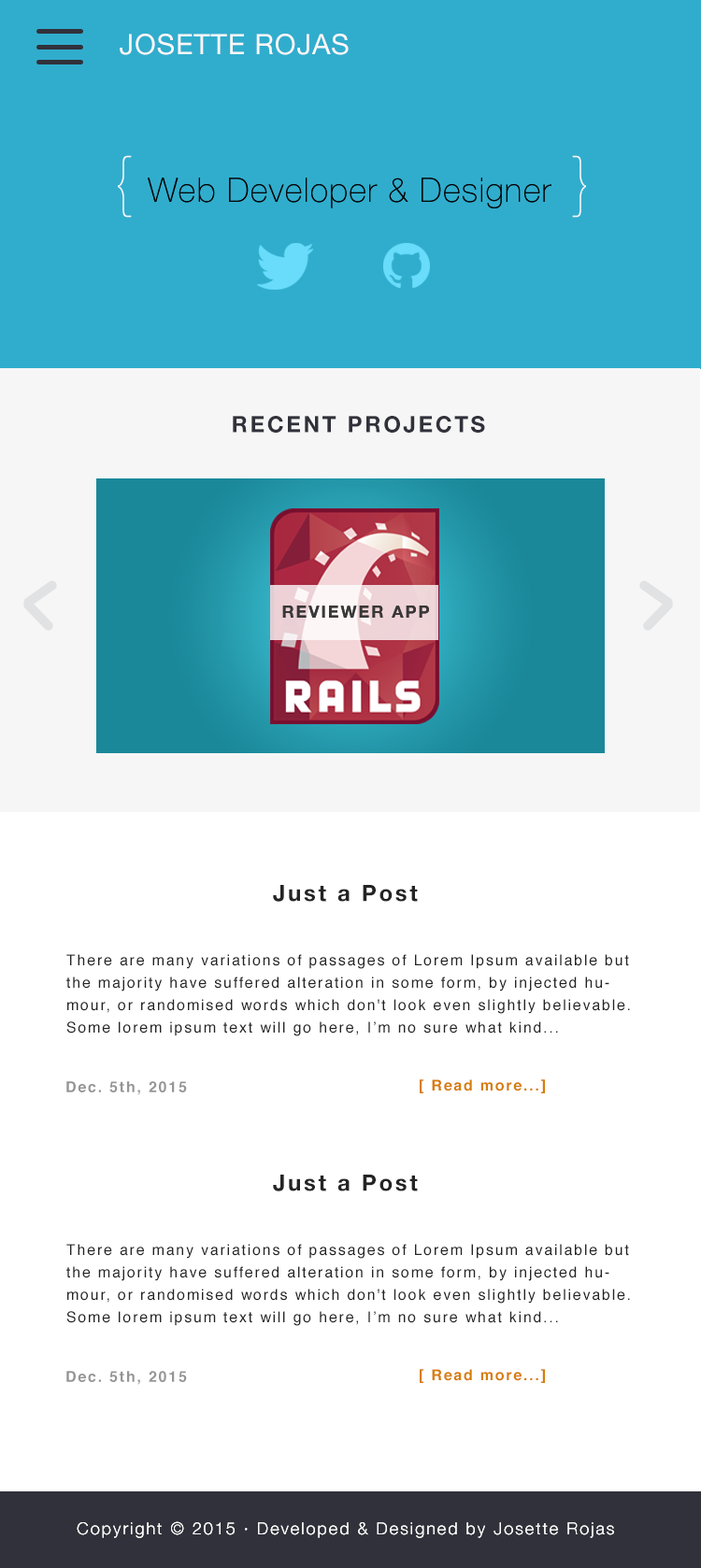
<style>
.page{position:relative;width:701px;height:1568px;background:#ffffff}
.page>*{position:absolute;margin:0}
.t1{font:28px "HelveticaNeue";letter-spacing:0.031em;color:#f7f7fb}
.t2{font:67.3px "HelveticaNeue-UltraLight";letter-spacing:0.031em;color:#f7f7fb}
.t3{font:33.6px "HelveticaNeue-Thin";letter-spacing:0.031em;color:#050505}
.t4{font:22.4px "HelveticaNeue-Bold";letter-spacing:0.111em;color:#31313b}
.t5{font:16.8px "HelveticaNeue-Bold";letter-spacing:0.111em;color:#393737}
.t6{font:22.4px "HelveticaNeue-Bold";letter-spacing:0.111em;color:#242424}
.t7{font:15px/22.4px "Helvetica";letter-spacing:0.111em;color:#242424}
.t8{font:15px "Helvetica-Bold";letter-spacing:0.111em;color:#959596}
.t9{font:15px "Helvetica-Bold";letter-spacing:0.111em;color:#d77d08}
.t10{font:16.8px "HelveticaNeue-Light";letter-spacing:0.111em;color:#fbfaf9}
</style>
<div class="page">
<p class="t1" style="left:120px;top:34px;width:229px;height:21px">JOSETTE ROJAS</p>
<p class="t2" style="left:118px;top:155px;width:14px;height:63px">{</p>
<p class="t2" style="left:572px;top:155px;width:14px;height:63px;rotate:180deg">{</p>
<p class="t3" style="left:148px;top:178px;width:403px;height:30px">Web Developer &amp; Designer</p>
<p class="t3" style="left:148px;top:178px;width:403px;height:30px">Web Developer &amp; Designer</p>
<p class="t4" style="left:233px;top:416px;width:252px;height:17px">RECENT PROJECTS</p>
<p class="t5" style="left:282px;top:606px;width:147px;height:12px">REVIEWER APP</p>
<p class="t5" style="left:282px;top:606px;width:147px;height:12px">REVIEWER APP</p>
<p class="t6" style="left:273px;top:885px;width:145px;height:17px">Just a Post</p>
<p class="t7" style="left:66px;top:954px;width:564px;height:82px">There are many variations of passages of Lorem Ipsum available but <br>the majority have suffered alteration in some form, by injected hu-<br>mour, or randomised words which don't look even slightly believable.<br>Some lorem ipsum text will go here, I’m no sure what kind...</p>
<p class="t8" style="left:66px;top:1081px;width:121px;height:14px">Dec. 5th, 2015</p>
<p class="t9" style="left:420px;top:1079px;width:125px;height:14px">[ Read more...]</p>
<p class="t6" style="left:273px;top:1175px;width:145px;height:16px">Just a Post</p>
<p class="t7" style="left:66px;top:1244px;width:564px;height:82px">There are many variations of passages of Lorem Ipsum available but <br>the majority have suffered alteration in some form, by injected hu-<br>mour, or randomised words which don't look even slightly believable.<br>Some lorem ipsum text will go here, I’m no sure what kind...</p>
<p class="t8" style="left:66px;top:1371px;width:121px;height:14px">Dec. 5th, 2015</p>
<p class="t9" style="left:420px;top:1369px;width:125px;height:14px">[ Read more...]</p>
<p class="t10" style="left:77px;top:1521px;width:537px;height:17px">Copyright © 2015 · Developed &amp; Designed by Josette Rojas</p>
<p class="t10" style="left:77px;top:1521px;width:537px;height:17px">Copyright © 2015 · Developed &amp; Designed by Josette Rojas</p>
</div>
